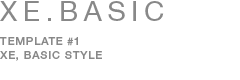
<style>
.page{position:relative;width:240px;height:80px;background:#ffffff}
.page>*{position:absolute;margin:0}
.t1{font:28px "HelveticaNeue-Roman";letter-spacing:0.2em;color:#888888;text-transform:uppercase}
.t2{font:11px/14px "HelveticaNeue-Medium";letter-spacing:0.075em;color:#888888;text-transform:uppercase}
</style>
<div class="page">
<p class="t1" style="left:0px;top:1px;width:164px;height:20px">XE.Basic</p>
<p class="t2" style="left:0px;top:37px;width:102px;height:24px">template #1<br>XE, basic style</p>
</div>
